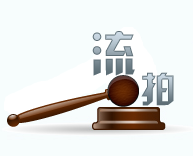
<style>
.page{position:relative;width:193px;height:156px;background:#f7fdfd}
.page>*{position:absolute;margin:0}
.t1{font:48px "HYk2gj";letter-spacing:0.26em}
.t2{font:36px "HYk2gj";letter-spacing:0.26em}
</style>
<div class="page">
<p class="t1" style="left:92px;top:31px;width:43px;height:45px">流</p>
<p class="t2" style="left:141px;top:72px;width:33px;height:34px">拍</p>
</div>
